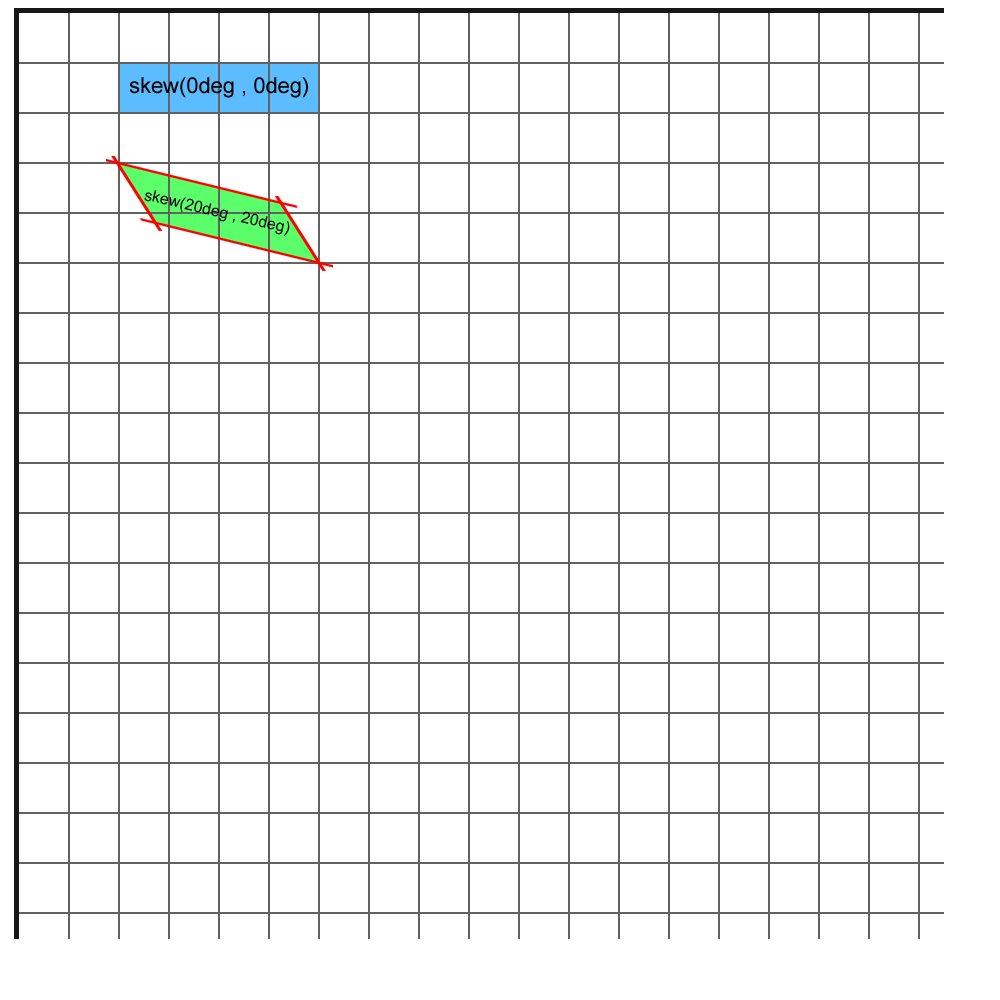
<style>
.page{position:relative;width:1000px;height:1000px;background:#ffffff}
.page>*{position:absolute;margin:0}
.t1{font:21.9px "ArialMT";color:#000000}
.t2{font:15.9px "ArialMT";color:#000000}
</style>
<div class="page">
<p class="t1" style="left:129px;top:77px;width:179px;height:21px">skew(0deg , 0deg)</p>
<p class="t2" style="left:144px;top:190px;width:146px;height:46px;rotate:13deg">skew(20deg , 20deg)</p>
</div>
